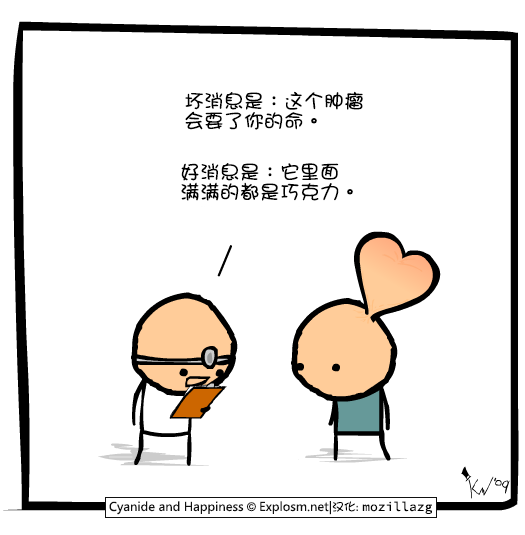
<style>
.page{position:relative;width:525px;height:535px;background:#ffffff}
.page>*{position:absolute;margin:0}
.t1{font:20px/20px "DFGirl";color:#000000}
</style>
<div class="page">
<p class="t1" style="left:185px;top:91px;width:178px;height:39px">坏消息是：这个肿瘤<br>会要了你的命。</p>
<p class="t1" style="left:181px;top:163px;width:172px;height:38px">好消息是：它里面<br>满满的都是巧克力。</p>
</div>
